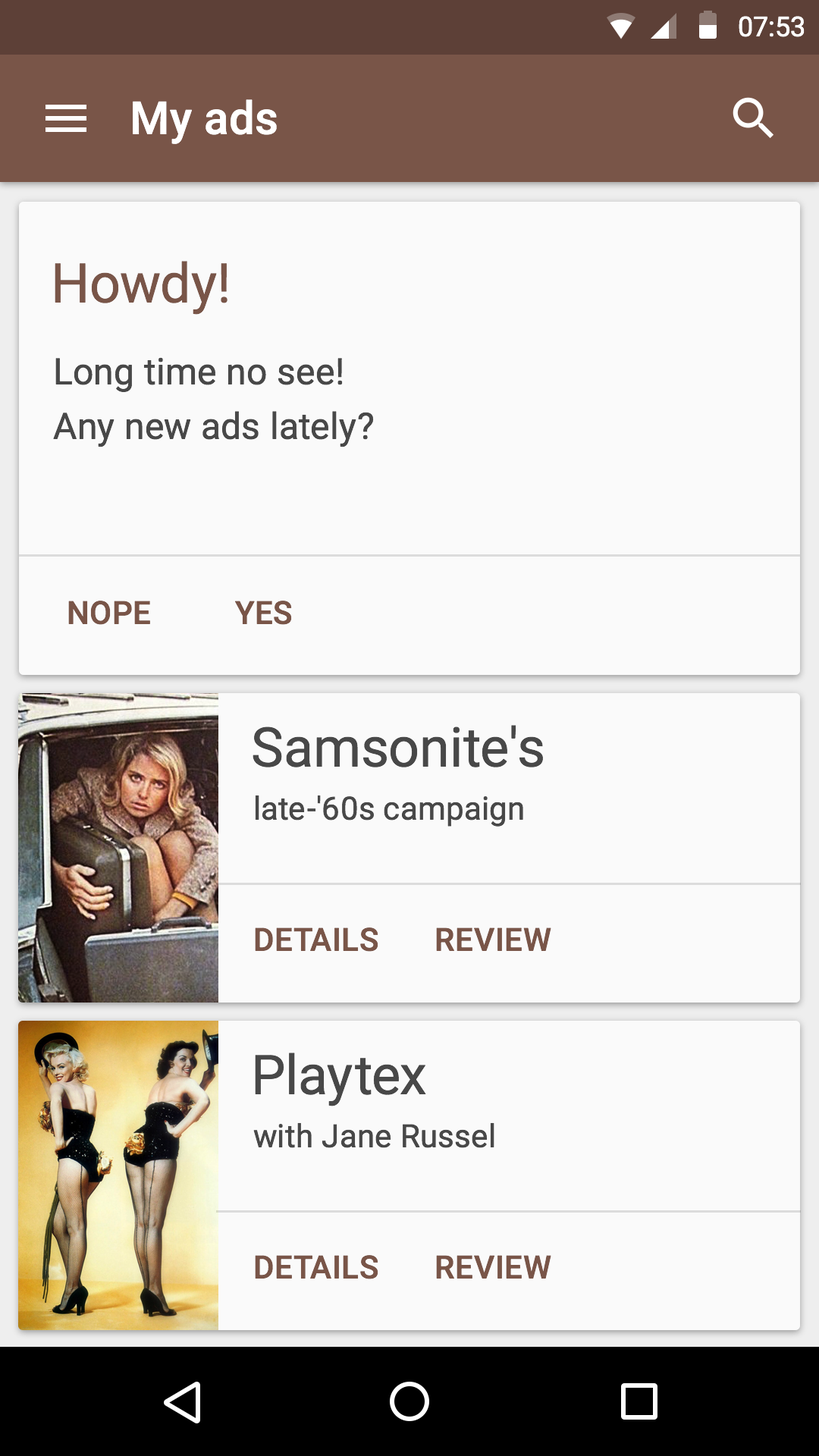
<style>
.page{position:relative;width:819px;height:1456px;background:#fafafa}
.page>*{position:absolute;margin:0}
.t1{font:27.3px "Roboto-Regular";color:#ffffff}
.t2{font:45.5px "Roboto-Medium";letter-spacing:0.005em;color:#ffffff}
.t3{font:54.6px "Roboto-Regular";letter-spacing:0.005em;color:#795548}
.t4{font:36.4px/54.6px "Roboto-Regular";letter-spacing:0.01em;color:#484848}
.t5{font:31.8px "Roboto-Medium";letter-spacing:0.01em;color:#795548;text-transform:uppercase}
.t6{font:54.6px "Roboto-Regular";letter-spacing:0.005em;color:#484848}
.t7{font:31.8px "Roboto-Regular";letter-spacing:0.01em;color:#484848}
</style>
<div class="page">
<p class="t1" style="left:739px;top:16px;width:66px;height:21px">07:53</p>
<p class="t2" style="left:133px;top:99px;width:144px;height:45px">My ads</p>
<p class="t3" style="left:55px;top:261px;width:172px;height:54px">Howdy!</p>
<p class="t4" style="left:53px;top:357px;width:321px;height:90px">Long time no see!<br>Any new ads lately?</p>
<p class="t5" style="left:68px;top:601px;width:82px;height:24px">NOPE</p>
<p class="t5" style="left:235px;top:601px;width:57px;height:24px">YES</p>
<p class="t6" style="left:253px;top:725px;width:290px;height:42px">Samsonite's</p>
<p class="t7" style="left:255px;top:795px;width:268px;height:32px">late-'60s campaign</p>
<p class="t5" style="left:255px;top:927px;width:123px;height:25px">Details</p>
<p class="t5" style="left:436px;top:927px;width:115px;height:24px">REVIEW</p>
<p class="t6" style="left:255px;top:1053px;width:171px;height:53px">Playtex</p>
<p class="t7" style="left:253px;top:1122px;width:241px;height:26px">with Jane Russel</p>
<p class="t5" style="left:255px;top:1255px;width:123px;height:24px">Details</p>
<p class="t5" style="left:436px;top:1255px;width:115px;height:24px">REVIEW</p>
</div>
